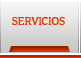
<style>
.page{position:relative;width:81px;height:58px}
.page>*{position:absolute;margin:0}
.t1{font:11px "Congress-Bold";color:#e03400;text-transform:uppercase}
</style>
<div class="page">
<p class="t1" style="left:12px;top:17px;width:53px;height:8px">servicios</p>
</div>
